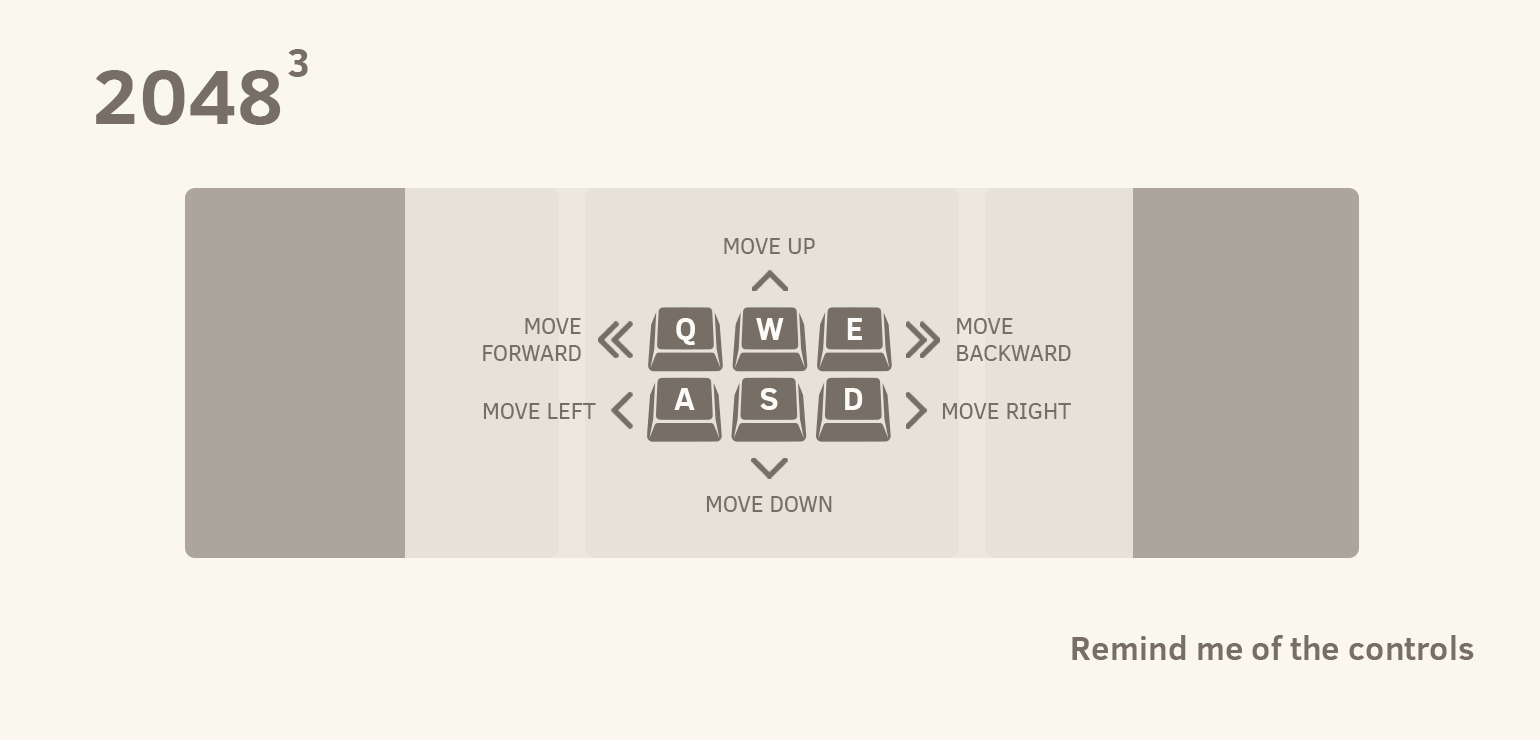
<style>
.page{position:relative;width:1540px;height:740px;background:#faf7ee}
.page>*{position:absolute;margin:0}
.t1{font:40.4px "ClearSans-Bold";color:#776e65}
.t2{font:79px "ClearSans-Bold";color:#776e65}
.t3{font:22.6px "ClearSans";color:#776e65}
.t4{font:31.6px "ClearSans-Bold";color:#fdfbf7}
.t5{font:33.3px "ClearSans-Bold";color:#776e65}
</style>
<div class="page">
<p class="t1" style="left:288px;top:49px;width:20px;height:28px">3</p>
<p class="t2" style="left:96px;top:70px;width:185px;height:55px">2048</p>
<p class="t3" style="left:724px;top:238px;width:91px;height:16px">MOVE UP</p>
<p class="t3" style="left:483px;top:318px;width:98px;height:43px;text-align:right">MOVE<br>FORWARD</p>
<p class="t4" style="left:676px;top:318px;width:19px;height:27px">Q</p>
<p class="t4" style="left:756px;top:318px;width:28px;height:22px">W</p>
<p class="t4" style="left:847px;top:318px;width:15px;height:22px">E</p>
<p class="t3" style="left:957px;top:318px;width:114px;height:43px">MOVE<br>BACKWARD</p>
<p class="t4" style="left:674px;top:388px;width:21px;height:22px">A</p>
<p class="t4" style="left:760px;top:388px;width:18px;height:22px">S</p>
<p class="t4" style="left:845px;top:388px;width:18px;height:22px">D</p>
<p class="t3" style="left:483px;top:403px;width:113px;height:16px">MOVE LEFT</p>
<p class="t3" style="left:942px;top:403px;width:129px;height:16px">MOVE RIGHT</p>
<p class="t3" style="left:706px;top:496px;width:126px;height:16px">MOVE DOWN</p>
<p class="t5" style="left:1072px;top:635px;width:402px;height:25px">Remind me of the controls</p>
</div>
